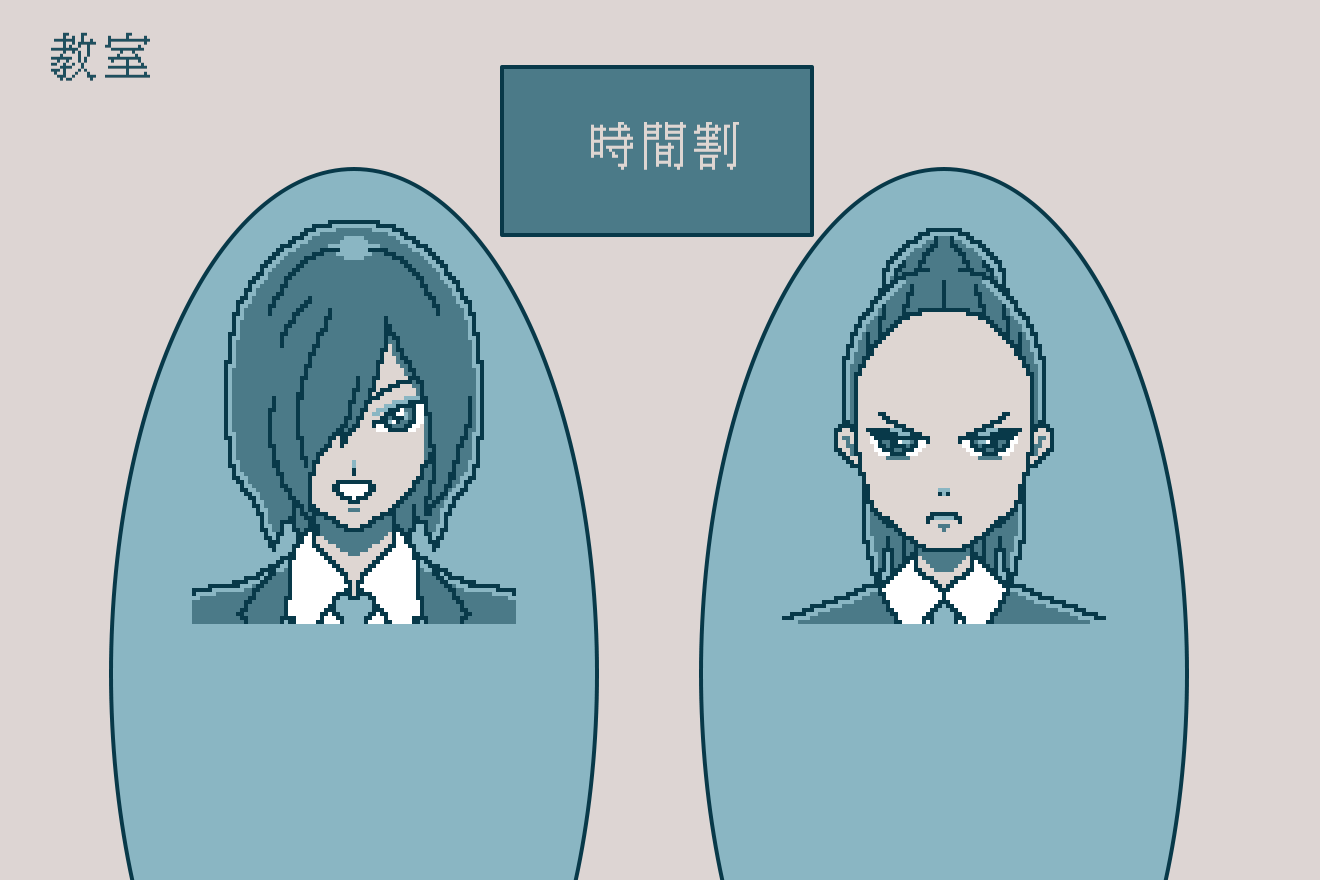
<style>
.page{position:relative;width:1320px;height:880px;background:#ddd5d3}
.page>*{position:absolute;margin:0}
.t1{font:48px "KH-Dot-kagurazaka-16";letter-spacing:0.14em;color:#1e4f5e}
.t2{font:48px "KH-Dot-kagurazaka-16";letter-spacing:0.14em;color:#e0d8d1}
</style>
<div class="page">
<p class="t1" style="left:51px;top:32px;width:99px;height:49px">教室</p>
<p class="t2" style="left:591px;top:122px;width:148px;height:48px">時間割</p>
</div>
